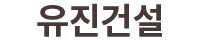
<style>
.page{position:relative;width:200px;height:40px;background:#ffffff}
.page>*{position:absolute;margin:0}
.t1{font:36px "NotoSansKR-Bold";letter-spacing:-0.025em;color:#463939;text-transform:uppercase}
</style>
<div class="page">
<p class="t1" style="left:37px;top:3px;width:125px;height:34px">유진건설</p>
</div>
